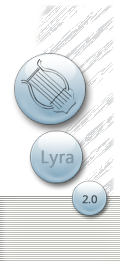
<style>
.page{position:relative;width:120px;height:262px;background:#ffffff}
.page>*{position:absolute;margin:0}
.t1{font:18px "SegoeUI";color:#8399a6;font-weight:bold}
.t2{font:11px "SegoeUI";color:#434d53;font-weight:bold}
</style>
<div class="page">
<p class="t1" style="left:41px;top:150px;width:33px;height:18px">Lyra</p>
<p class="t2" style="left:82px;top:195px;width:15px;height:9px">2.0</p>
</div>
